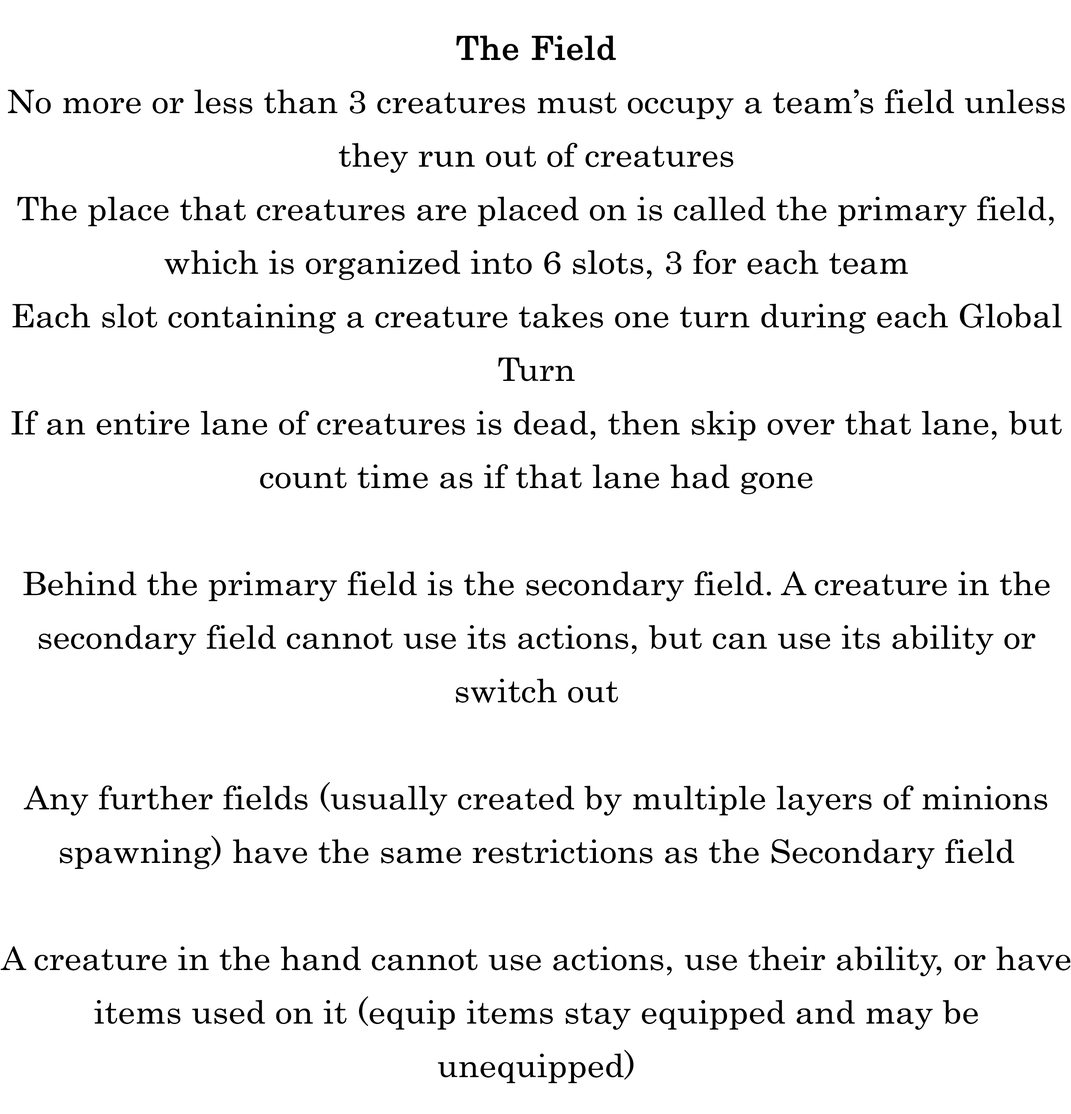
<style>
.page{position:relative;width:1071px;height:1114px;background:#ffffff}
.page>*{position:absolute;margin:0}
.t1{font:55.1px/53.5px "Century";color:#000000;scale:1.07 1}
.t2{font:55.1px/53.5px "Century";color:#000000;font-weight:bold;scale:1.07 1}
</style>
<div class="page">
<p class="t1" style="left:0px;top:36px;width:1070px;height:1047px;text-align:center"><span class="t2">The Field<br></span>No more or less than 3 creatures must occupy a team’s field unless they run out of creatures<br>The place that creatures are placed on is called the primary field, which is organized into 6 slots, 3 for each team<br>Each slot containing a creature takes one turn during each Global Turn<br>If an entire lane of creatures is dead, then skip over that lane, but count time as if that lane had gone<br><br>Behind the primary field is the secondary field. A creature in the secondary field cannot use its actions, but can use its ability or switch out<br><br>Any further fields (usually created by multiple layers of minions spawning) have the same restrictions as the Secondary field<br><br>A creature in the hand cannot use actions, use their ability, or have items used on it (equip items stay equipped and may be unequipped)</p>
</div>
